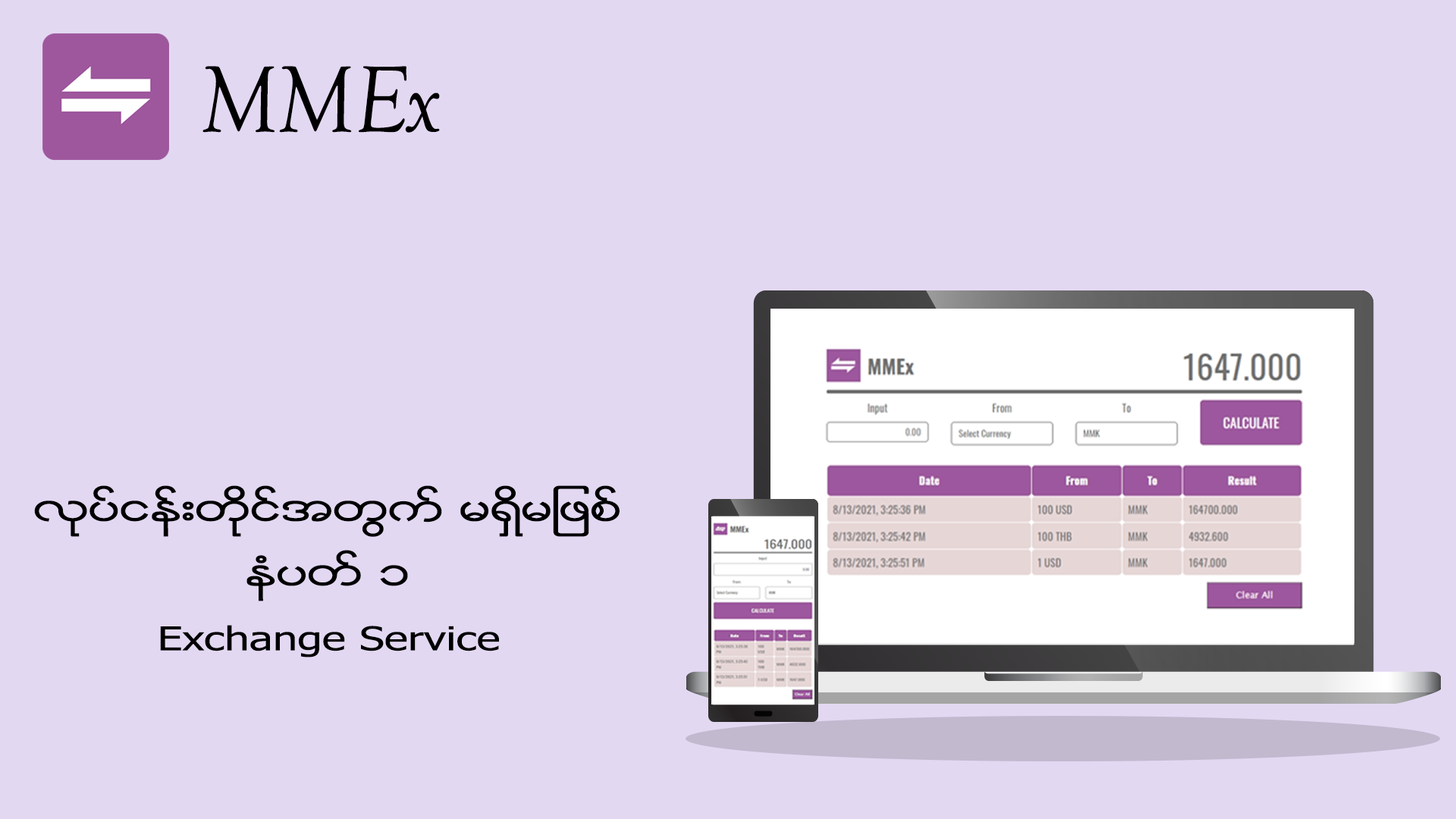
<style>
.page{position:relative;width:1456px;height:819px;background:#e3d8f2}
.page>*{position:absolute;margin:0}
.t1{font:97.8px "GoudyOldStyleT-Italic";color:#000000;scale:0.93 1}
.t2{font:37.5px/64.5px "Zawgyi-One";color:#000000;scale:1.36 1}
.t3{font:32.8px/64.5px "Zawgyi-One";color:#000000;scale:1.36 1}
</style>
<div class="page">
<p class="t1" style="left:202px;top:66px;width:238px;height:67px">MMEx</p>
<p class="t2" style="left:34px;top:485px;width:586px;height:172px;text-align:center">လုပ္ငန္းတိုင္အတြက္ မရွိမျဖစ္ နံပတ္ ၁<br><span class="t3">Exchange Service</span></p>
</div>
